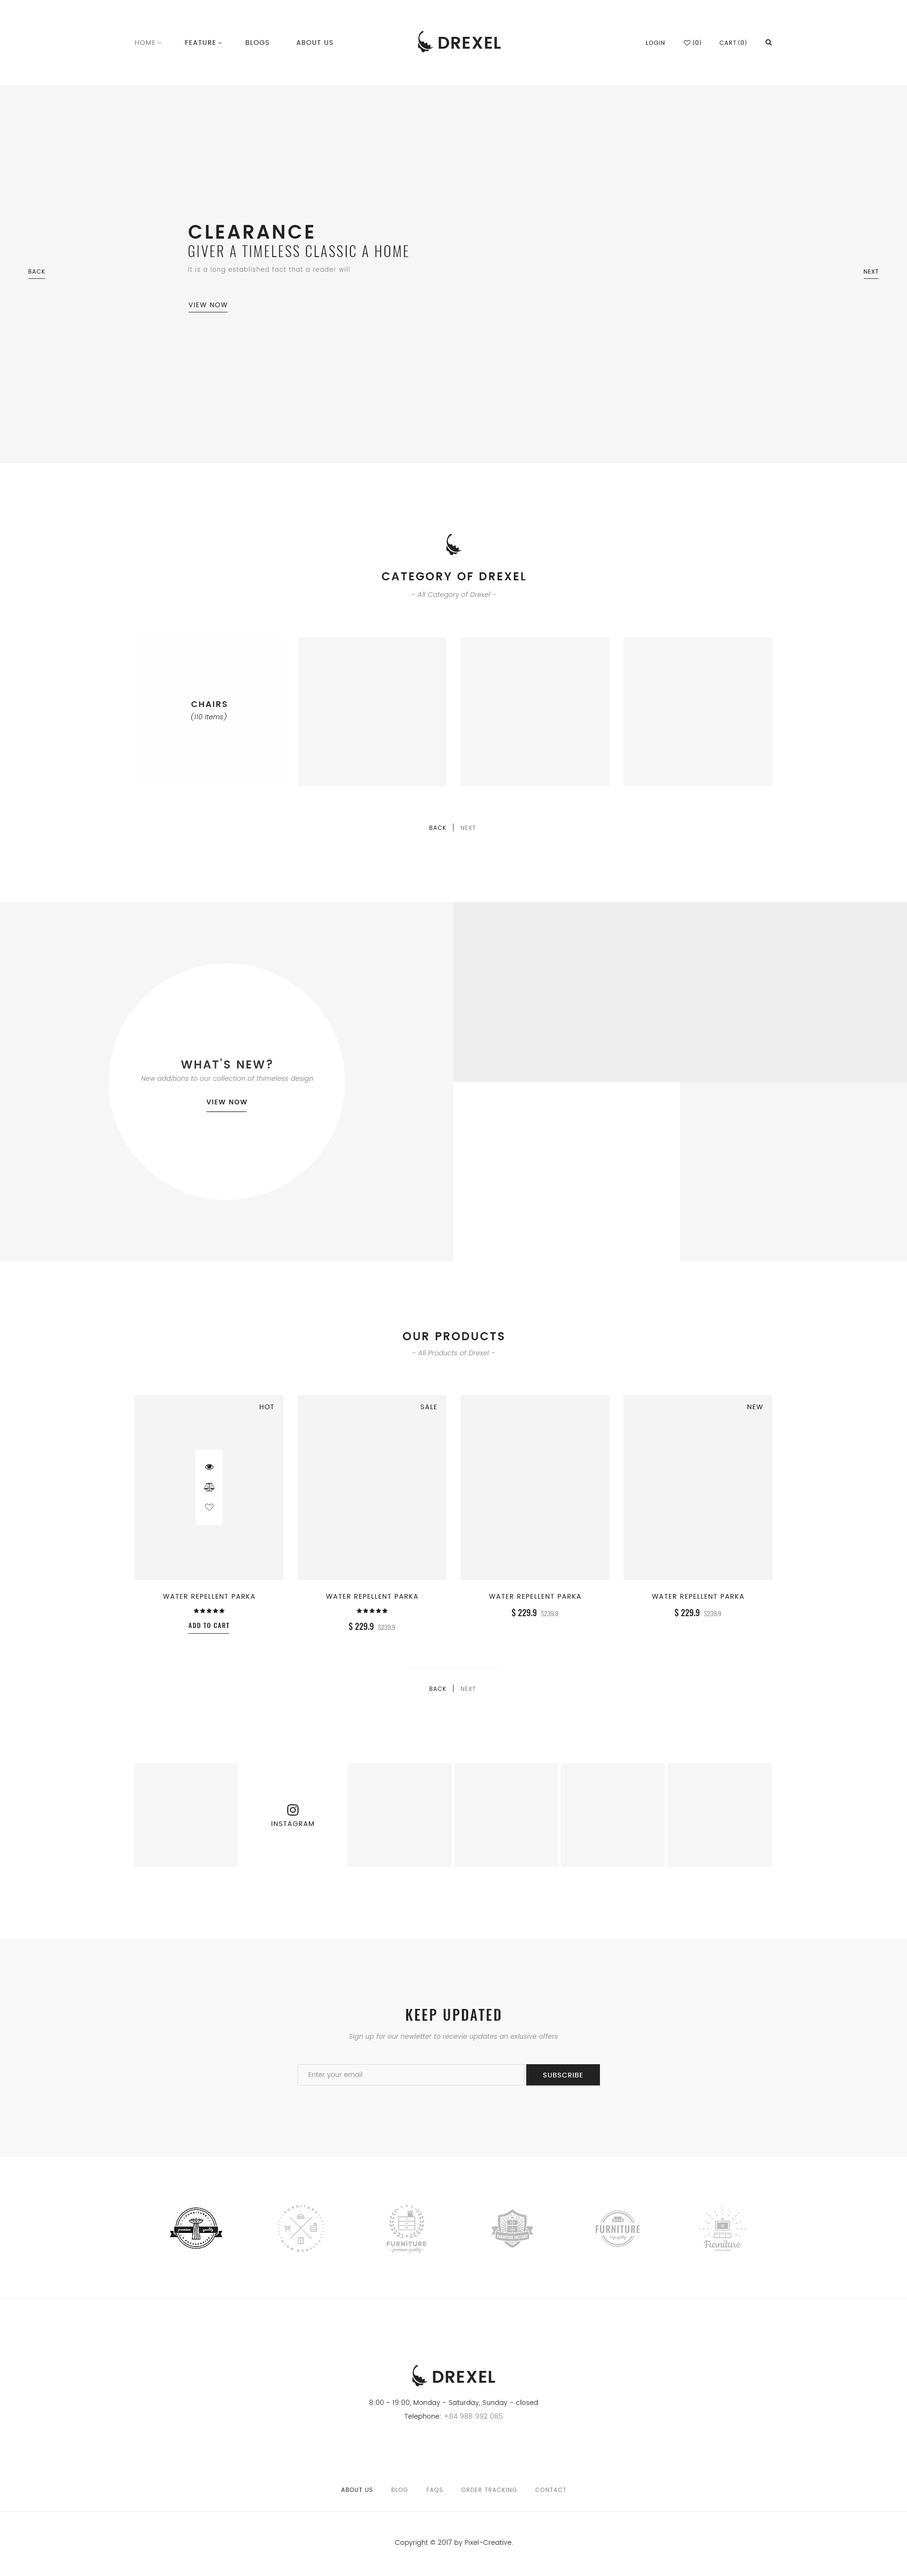
<style>
.page{position:relative;width:907px;height:2576px;background:#ffffff}
.page>*{position:absolute;margin:0}
.t1{font:6.6px "Poppins-Regular";letter-spacing:0.1em;color:#222222;text-transform:uppercase}
.t2{font:6.6px "Poppins-Regular";letter-spacing:0.1em;color:#888888;text-transform:uppercase}
.t3{font:5.7px "Poppins-Regular";letter-spacing:0.1em;color:#222222;text-transform:uppercase}
.t4{font:6.6px "MyriadPro-Regular";letter-spacing:0.1em;color:#222222;text-transform:uppercase}
.t5{font:18.9px "Poppins-SemiBold";letter-spacing:0.1em;color:#222222;text-transform:uppercase}
.t6{font:14.2px "Oswald-Light";letter-spacing:0.1em;color:#222222;text-transform:uppercase}
.t7{font:6.1px "Poppins-Light";letter-spacing:0.1em;color:#888888}
.t8{font:5.7px "MyriadPro-Regular";letter-spacing:0.1em;color:#222222;text-transform:uppercase}
.t9{font:11.3px "Poppins-SemiBold";letter-spacing:0.1em;color:#222222;text-transform:uppercase}
.t10{font:6.6px "Poppins-Light";letter-spacing:0.025em;color:#888888;font-style:italic}
.t11{font:8.5px "Poppins-SemiBold";letter-spacing:0.1em;color:#222222;text-transform:uppercase}
.t12{font:6.6px "Poppins-Light";letter-spacing:0.025em;color:#222222;font-style:italic}
.t13{font:5.7px "MyriadPro-Regular";letter-spacing:0.1em;color:#888888;text-transform:uppercase}
.t14{font:5.7px "Poppins-Regular";letter-spacing:0.1em;color:#888888;text-transform:uppercase}
.t15{font:11.3px "Poppins-SemiBold";letter-spacing:0.1em;color:#363636;text-transform:uppercase}
.t16{font:6.6px "Poppins-SemiBold";letter-spacing:0.1em;color:#222222;text-transform:uppercase}
.t17{font:8.5px "Oswald-Medium";color:#222222}
.t18{font:6.6px "Oswald-Light";color:#888888}
.t19{font:6.6px "Oswald-Medium";letter-spacing:0.1em;color:#222222;text-transform:uppercase}
.t20{font:14.2px "Oswald-Medium";letter-spacing:0.1em;color:#222222}
.t21{font:6.6px "Poppins-Light";letter-spacing:0.025em;color:#888888}
.t22{font:6.6px "Poppins-Regular";letter-spacing:0.1em;color:#ffffff;text-transform:uppercase}
.t23{font:6.6px "Poppins-Light";letter-spacing:0.025em;color:#222222}
</style>
<div class="page">
<p class="t1" style="left:135px;top:40px;width:198px;height:5px"><span class="t2">Home</span>           Feature           Blogs          About Us</p>
<p class="t3" style="left:646px;top:41px;width:19px;height:4px">Login</p>
<p class="t4" style="left:693px;top:40px;width:8px;height:5px">(0)</p>
<p class="t3" style="left:720px;top:41px;width:16px;height:4px">Cart</p>
<p class="t4" style="left:739px;top:40px;width:8px;height:5px">(0)</p>
<p class="t5" style="left:189px;top:225px;width:125px;height:14px">Clearance</p>
<p class="t6" style="left:189px;top:245px;width:219px;height:12px">Giver a timeless classic a home</p>
<p class="t3" style="left:28px;top:269px;width:17px;height:5px">Back</p>
<p class="t7" style="left:188px;top:267px;width:162px;height:7px">It is a long established fact that a reader will</p>
<p class="t8" style="left:864px;top:269px;width:15px;height:5px"><span class="t3">N</span>ext</p>
<p class="t1" style="left:189px;top:302px;width:38px;height:5px">View now</p>
<p class="t9" style="left:382px;top:572px;width:144px;height:8px">Category of Drexel</p>
<p class="t10" style="left:412px;top:592px;width:84px;height:7px">- All Category of Drexel -</p>
<p class="t11" style="left:191px;top:701px;width:36px;height:6px">Chairs</p>
<p class="t12" style="left:191px;top:713px;width:36px;height:8px">(110 Items)</p>
<p class="t3" style="left:430px;top:826px;width:16px;height:4px">Back</p>
<p class="t13" style="left:461px;top:826px;width:15px;height:4px"><span class="t14">N</span>ext</p>
<p class="t15" style="left:181px;top:1059px;width:91px;height:9px">What’s new?</p>
<p class="t10" style="left:141px;top:1076px;width:172px;height:7px">New additions to our collection of thimeless design</p>
<p class="t16" style="left:207px;top:1100px;width:40px;height:4px">View now</p>
<p class="t9" style="left:403px;top:1332px;width:101px;height:8px">our products</p>
<p class="t10" style="left:413px;top:1350px;width:82px;height:5px">- All Products of Drexel -</p>
<p class="t1" style="left:259px;top:1404px;width:15px;height:5px">Hot</p>
<p class="t1" style="left:421px;top:1404px;width:16px;height:5px">SAle</p>
<p class="t1" style="left:748px;top:1404px;width:15px;height:5px">New</p>
<p class="t1" style="left:163px;top:1594px;width:92px;height:5px">Water Repellent Parka</p>
<p class="t1" style="left:326px;top:1594px;width:92px;height:5px">Water Repellent Parka</p>
<p class="t1" style="left:489px;top:1594px;width:92px;height:5px">Water Repellent Parka</p>
<p class="t1" style="left:652px;top:1594px;width:92px;height:5px">Water Repellent Parka</p>
<p class="t17" style="left:512px;top:1608px;width:47px;height:9px">$ 229.9  <span class="t18">$239.9</span></p>
<p class="t17" style="left:675px;top:1608px;width:47px;height:9px">$ 229.9  <span class="t18">$239.9</span></p>
<p class="t19" style="left:189px;top:1623px;width:40px;height:5px">Add to cart</p>
<p class="t17" style="left:349px;top:1622px;width:47px;height:9px">$ 229.9  <span class="t18">$239.9</span></p>
<p class="t3" style="left:430px;top:1687px;width:16px;height:4px">Back</p>
<p class="t13" style="left:461px;top:1687px;width:15px;height:4px"><span class="t14">N</span>ext</p>
<p class="t1" style="left:271px;top:1821px;width:43px;height:5px">Instagram</p>
<p class="t20" style="left:406px;top:2009px;width:95px;height:12px">KEEP UPDATED</p>
<p class="t10" style="left:349px;top:2033px;width:209px;height:8px">Sign up for our newletter to recevie updates an exlusive offers</p>
<p class="t21" style="left:309px;top:2072px;width:53px;height:7px">Enter your email</p>
<p class="t22" style="left:543px;top:2073px;width:40px;height:4px">Subscribe</p>
<p class="t23" style="left:370px;top:2400px;width:168px;height:7px">8:00 - 19:00, Monday - Saturday, Sunday - closed</p>
<p class="t21" style="left:405px;top:2413px;width:98px;height:8px"><span class="t23">Telephone: </span>+84 988 992 085</p>
<p class="t14" style="left:341px;top:2488px;width:225px;height:5px"><span class="t3">About Us</span>        Blog        FAQs        Order Tracking        Contact</p>
<p class="t23" style="left:395px;top:2540px;width:118px;height:7px">Copyright © 2017 by Pixel-Creative.</p>
</div>
